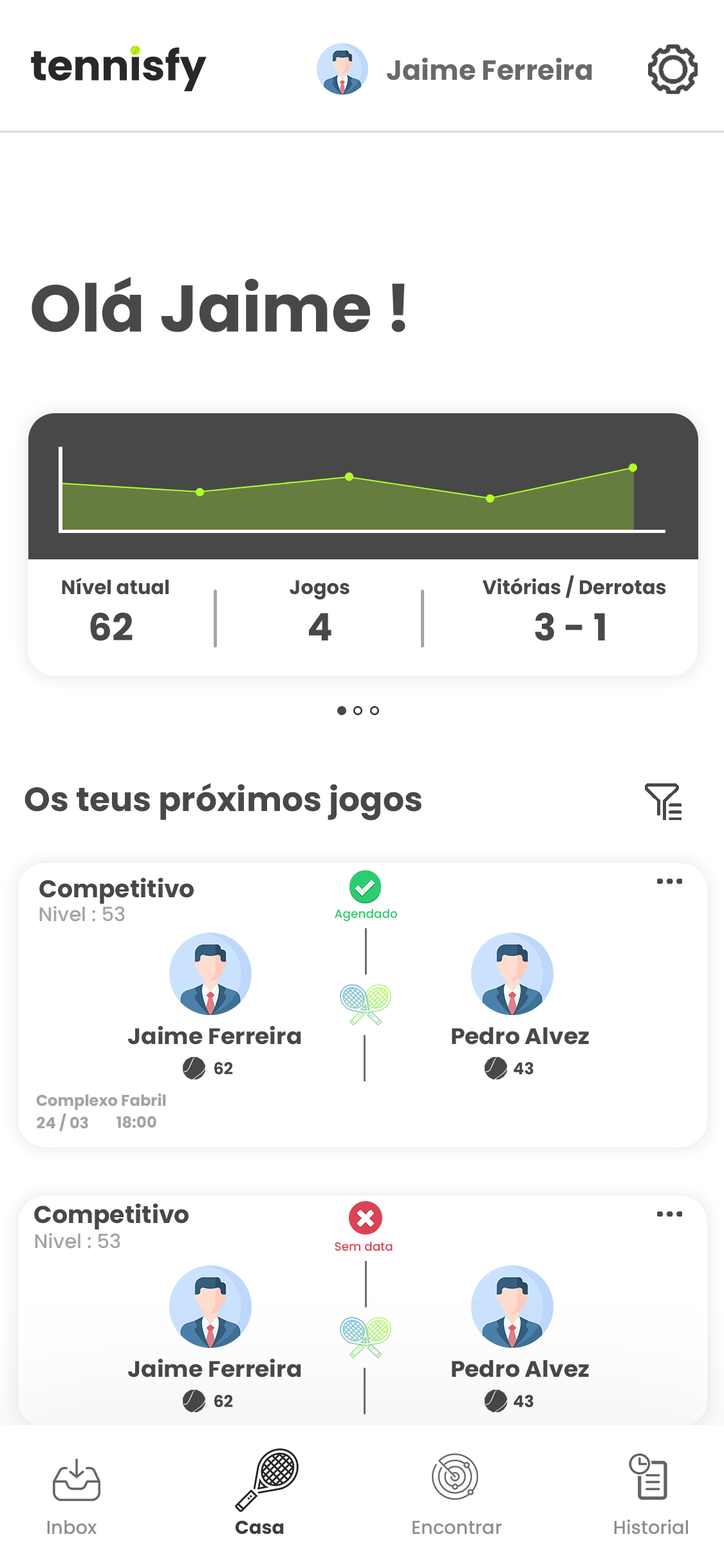
<style>
.page{position:relative;width:724px;height:1568px;background:#ffffff}
.page>*{position:absolute;margin:0}
.t1{font:27.7px "Poppins-Bold";color:#696969}
.t2{font:65.8px "Poppins-Bold";color:#484848}
.t3{font:19.6px "Poppins-Bold";color:#484848}
.t4{font:37.3px "Poppins-Bold";color:#484848}
.t5{font:38px "Poppins-Bold";color:#484848}
.t6{font:33.5px "Poppins-Bold";color:#484848}
.t7{font:24.3px "Poppins-Bold";color:#484848}
.t8{font:19.7px "Poppins-Medium";color:#a3a3a3}
.t9{font:11.9px "Poppins-Medium";color:#2ecc71}
.t10{font:22.5px "Poppins-Bold";color:#484848;scale:1.04 1}
.t11{font:16.4px "Poppins-Bold";color:#484848}
.t12{font:15.5px "Poppins-Bold";color:#a3a3a3}
.t13{font:11.9px "Poppins-Medium";color:#da4453}
.t14{font:18.7px "Poppins-Medium";color:#8d8d8d}
.t15{font:18.7px "Poppins-Bold";color:#3d3d3d}
</style>
<div class="page">
<p class="t1" style="left:387px;top:57px;width:205px;height:23px">Jaime Ferreira</p>
<p class="t2" style="left:32px;top:277px;width:374px;height:55px">Olá Jaime !</p>
<p class="t3" style="left:62px;top:577px;width:107px;height:18px">Nível atual</p>
<p class="t3" style="left:290px;top:580px;width:60px;height:20px">Jogos</p>
<p class="t3" style="left:482px;top:575px;width:184px;height:23px">Vitórias / Derrotas</p>
<p class="t4" style="left:90px;top:612px;width:43px;height:29px">62</p>
<p class="t5" style="left:309px;top:613px;width:22px;height:27px">4</p>
<p class="t4" style="left:535px;top:612px;width:70px;height:29px">3 - 1</p>
<p class="t6" style="left:24px;top:783px;width:398px;height:38px">Os teus próximos jogos</p>
<p class="t7" style="left:39px;top:877px;width:155px;height:27px">Competitivo</p>
<p class="t8" style="left:39px;top:906px;width:86px;height:16px">Nivel : 53</p>
<p class="t9" style="left:335px;top:909px;width:63px;height:13px">Agendado</p>
<p class="t10" style="left:128px;top:1026px;width:173px;height:19px">Jaime Ferreira</p>
<p class="t10" style="left:452px;top:1027px;width:137px;height:18px">Pedro Alvez</p>
<p class="t11" style="left:214px;top:1062px;width:19px;height:12px">62</p>
<p class="t11" style="left:514px;top:1062px;width:20px;height:13px">43</p>
<p class="t12" style="left:36px;top:1093px;width:130px;height:17px">Complexo Fabril</p>
<p class="t12" style="left:37px;top:1114px;width:51px;height:18px">24 / 03</p>
<p class="t12" style="left:117px;top:1116px;width:39px;height:12px">18:00</p>
<p class="t7" style="left:34px;top:1203px;width:155px;height:26px">Competitivo</p>
<p class="t8" style="left:35px;top:1233px;width:85px;height:16px">Nivel : 53</p>
<p class="t13" style="left:335px;top:1242px;width:58px;height:9px">Sem data</p>
<p class="t10" style="left:128px;top:1359px;width:173px;height:18px">Jaime Ferreira</p>
<p class="t10" style="left:452px;top:1360px;width:137px;height:17px">Pedro Alvez</p>
<p class="t11" style="left:214px;top:1395px;width:19px;height:12px">62</p>
<p class="t11" style="left:514px;top:1395px;width:20px;height:13px">43</p>
<p class="t14" style="left:47px;top:1520px;width:50px;height:15px">Inbox</p>
<p class="t15" style="left:236px;top:1520px;width:48px;height:15px">Casa</p>
<p class="t14" style="left:413px;top:1520px;width:89px;height:15px">Encontrar</p>
<p class="t14" style="left:614px;top:1519px;width:74px;height:16px">Historial</p>
</div>
